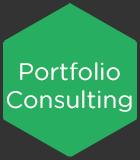
<style>
.page{position:relative;width:140px;height:160px;background:#27ae60}
.page>*{position:absolute;margin:0}
.t1{font:24px "GothamRounded-Book";color:#ffffff}
</style>
<div class="page">
<p class="t1" style="left:7px;top:62px;width:125px;height:50px;text-align:center">Portfolio<br>Consulting</p>
</div>
